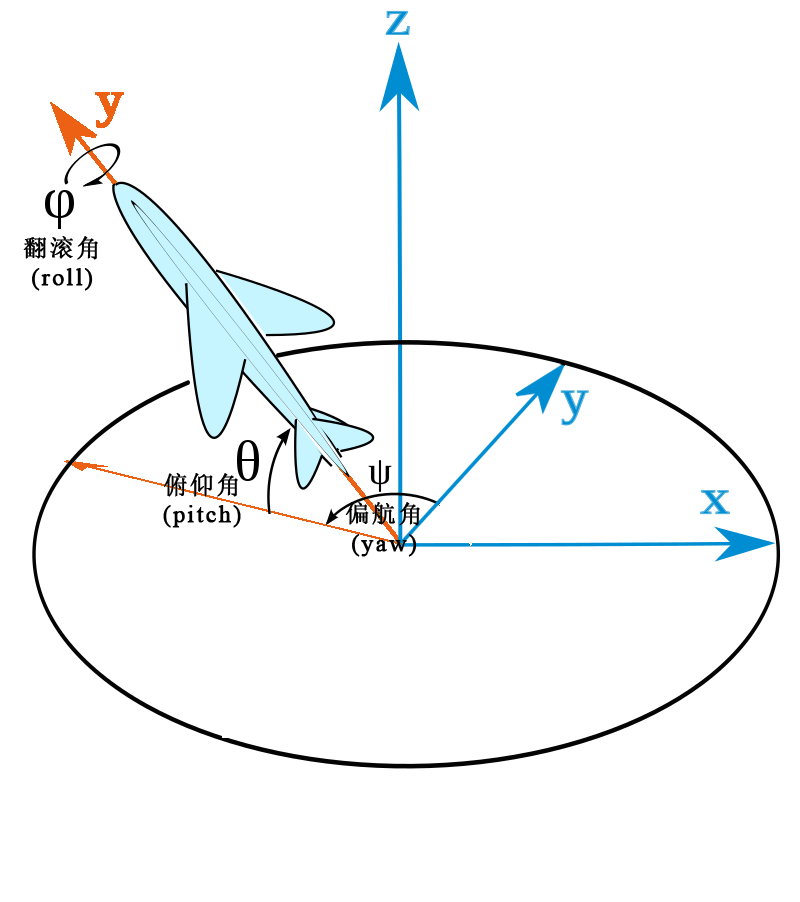
<style>
.page{position:relative;width:800px;height:902px;background:#ffffff}
.page>*{position:absolute;margin:0}
.t1{font:24px "TimesNewRomanPSMT";letter-spacing:0.075em;color:#000000;font-weight:bold}
.t2{font:24px "SimSun";letter-spacing:0.075em;color:#000000;font-weight:bold}
</style>
<div class="page">
<p class="t1" style="left:23px;top:236px;width:75px;height:55px;text-align:center"><span class="t2">翻滚角<br></span>(roll)</p>
<p class="t1" style="left:163px;top:473px;width:78px;height:55px;text-align:center"><span class="t2">俯仰角<br></span>(pitch)</p>
<p class="t1" style="left:345px;top:502px;width:75px;height:55px;text-align:center"><span class="t2">偏航角<br></span>(yaw)</p>
</div>
